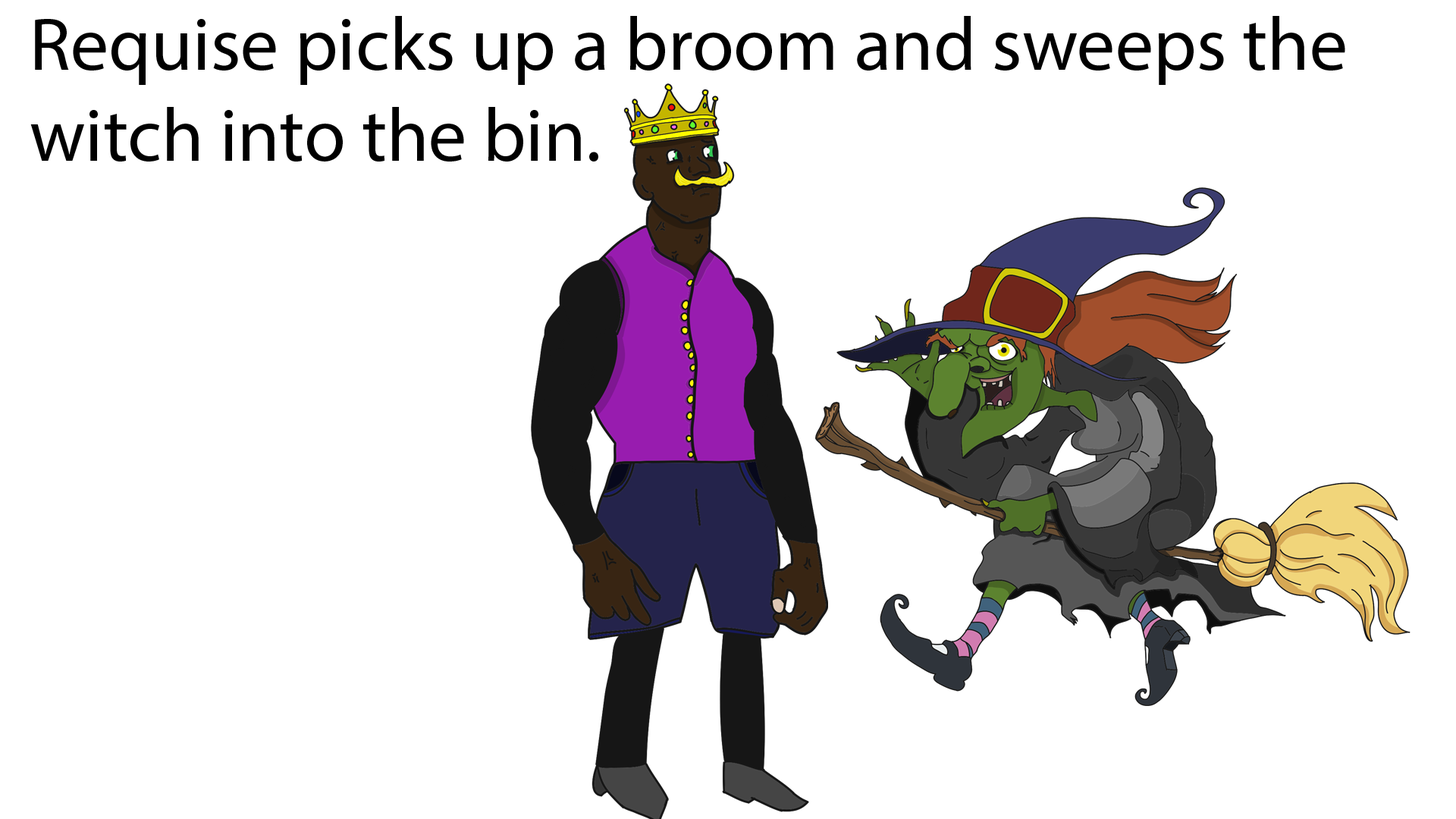
<style>
.page{position:relative;width:1456px;height:819px;background:#ffffff}
.page>*{position:absolute;margin:0}
.t1{font:75.8px "MyriadPro-Regular";color:#000000}
</style>
<div class="page">
<p class="t1" style="left:30px;top:16px;width:1315px;height:146px">Requise picks up a broom and sweeps the witch into the bin.</p>
</div>
